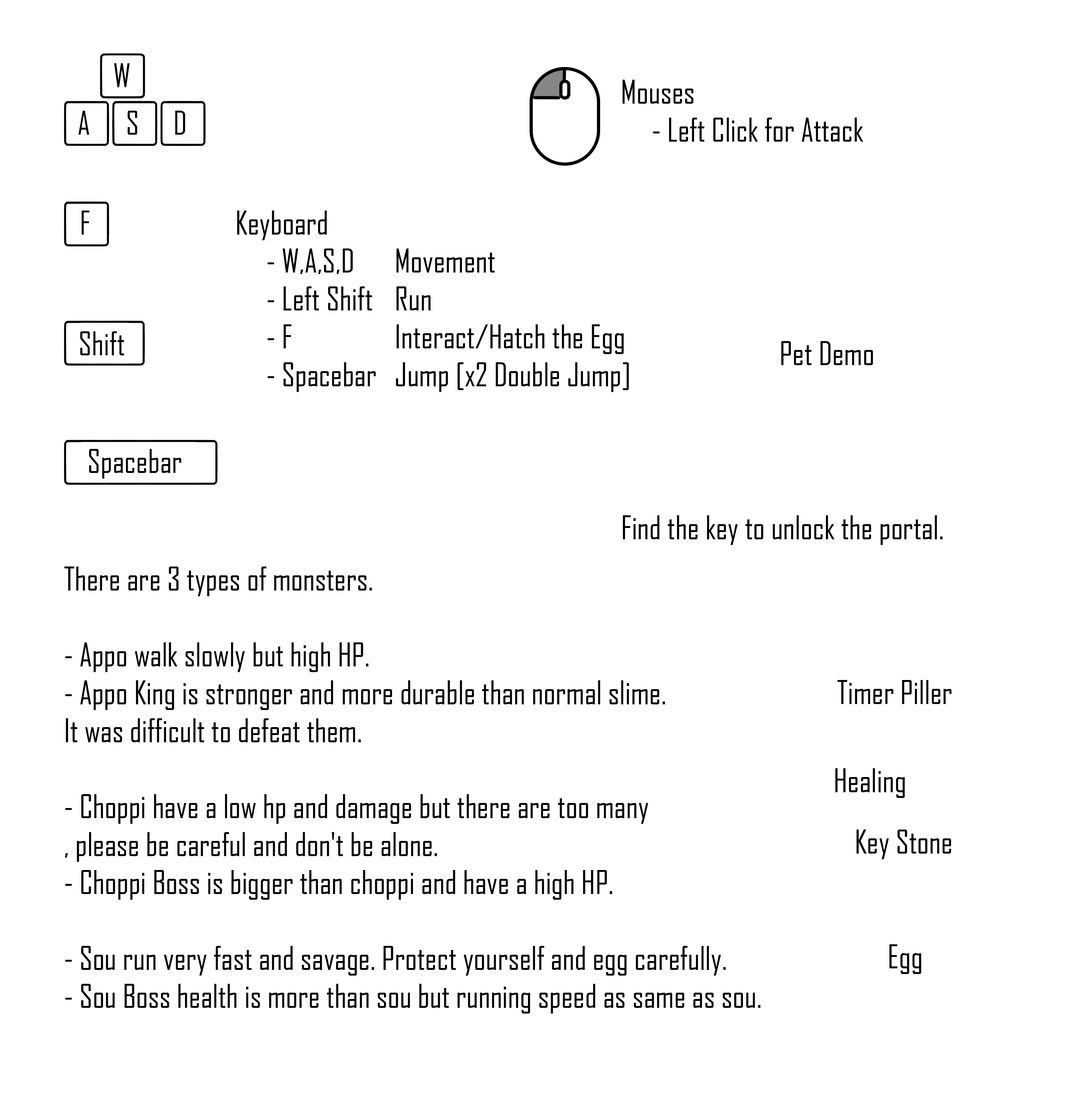
<style>
.page{position:relative;width:1075px;height:1109px;background:#ffffff}
.page>*{position:absolute;margin:0}
.t1{font:31.6px "AgencyFB-Reg";color:#000000}
</style>
<div class="page">
<p class="t1" style="left:114px;top:63px;width:16px;height:24px">W</p>
<p class="t1" style="left:623px;top:80px;width:240px;height:62px">Mouses<br>     - Left Click for Attack</p>
<p class="t1" style="left:78px;top:111px;width:11px;height:24px">A</p>
<p class="t1" style="left:127px;top:111px;width:10px;height:24px">S</p>
<p class="t1" style="left:175px;top:111px;width:10px;height:24px">D</p>
<p class="t1" style="left:82px;top:211px;width:7px;height:24px">F</p>
<p class="t1" style="left:237px;top:211px;width:392px;height:181px">Keyboard<br>     - W,A,S,D    Movement<br>     - Left Shift   Run<br>     - F          Interact/Hatch the Egg<br>     - Spacebar   Jump [x2 Double Jump]</p>
<p class="t1" style="left:80px;top:331px;width:44px;height:24px">Shift</p>
<p class="t1" style="left:781px;top:341px;width:92px;height:24px">Pet Demo</p>
<p class="t1" style="left:89px;top:449px;width:92px;height:30px">Spacebar</p>
<p class="t1" style="left:623px;top:515px;width:320px;height:30px">Find the key to unlock the portal.</p>
<p class="t1" style="left:64px;top:567px;width:696px;height:447px">There are 3 types of monsters.<br><br>- Appo walk slowly but high HP.<br>- Appo King is stronger and more durable than normal slime. <br>It was difficult to defeat them.<br><br>- Choppi have a low hp and damage but there are too many<br>, please be careful and don't be alone.<br>- Choppi Boss is bigger than choppi and have a high HP. <br><br>- Sou run very fast and savage. Protect yourself and egg carefully.<br>- Sou Boss health is more than sou but running speed as same as sou.</p>
<p class="t1" style="left:837px;top:680px;width:115px;height:24px">Timer Piller</p>
<p class="t1" style="left:835px;top:768px;width:70px;height:30px">Healing</p>
<p class="t1" style="left:857px;top:830px;width:94px;height:29px">Key Stone</p>
<p class="t1" style="left:889px;top:944px;width:32px;height:30px">Egg</p>
</div>
